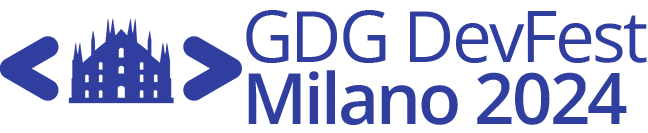
<style>
.page{position:relative;width:648px;height:133px;background:#ffffff}
.page>*{position:absolute;margin:0}
.t1{font:70.8px/62.5px "OpenSans-Regular";letter-spacing:-0.04em;color:#303f9f}
.t2{font:70.8px/62.5px "OpenSansRoman-SemiBold";letter-spacing:-0.04em;color:#303f9f}
</style>
<div class="page">
<p class="t1" style="left:246px;top:10px;width:401px;height:115px">GDG DevFest<br><span class="t2">Milano 2024</span></p>
</div>
